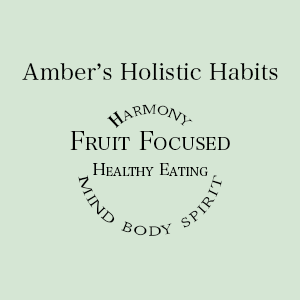
<style>
.page{position:relative;width:300px;height:300px;background:#d5e6d4}
.page>*{position:absolute;margin:0}
.t1{font:22.9px "HiraMinProN-W3";color:#000000}
.t2{font:16.7px "HiraMinProN-W3";color:#000000;font-variant:small-caps}
.t3{font:16.7px "HiraMinProN-W3";color:#000000}
.t4{font:26px "HiraMinProN-W3";color:#000000;font-variant:small-caps}
</style>
<div class="page">
<p class="t1" style="left:22px;top:63px;width:256px;height:17px">Amber’s Holistic Habits</p>
<p class="t2" style="left:107px;top:104px;width:86px;height:24px"><span class="t3">Ｈ</span>armony</p>
<p class="t4" style="left:70px;top:131px;width:160px;height:19px">Fruit Focused</p>
<p class="t2" style="left:93px;top:163px;width:115px;height:13px">Healthy Eating</p>
<p class="t2" style="left:78px;top:175px;width:145px;height:61px;text-align:center">mind body spirit</p>
</div>
